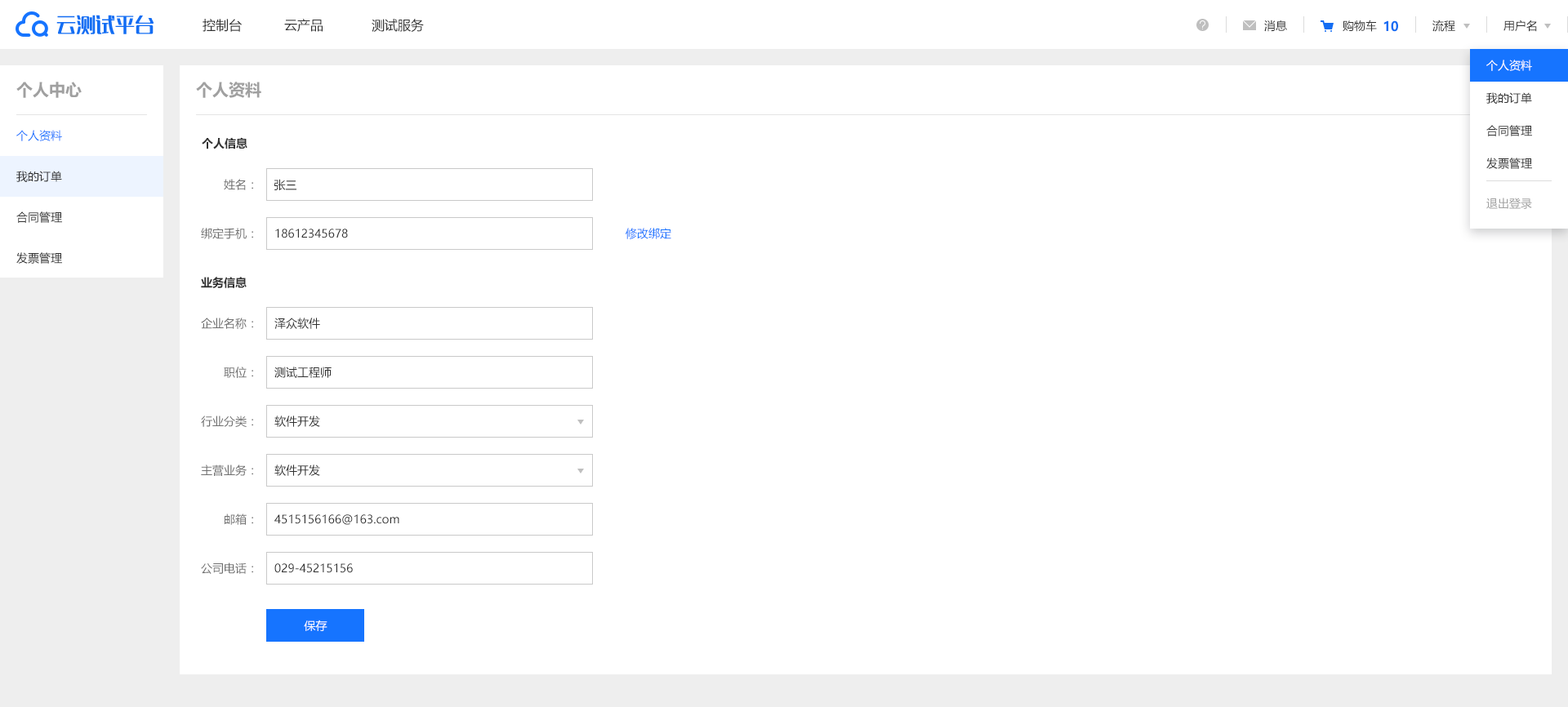
<style>
.page{position:relative;width:1568px;height:707px;background:#ffffff}
.page>*{position:absolute;margin:0}
.t1{font:19.6px "MFLangQian_Noncommercial-Regular";color:#136df3}
.t2{font:13.1px "MicrosoftYaHei";color:#313131}
.t3{font:11.4px "MicrosoftYaHei";color:#313131}
.t4{font:13.1px "MicrosoftYaHei-Bold";color:#136df3}
.t5{font:11.4px "MicrosoftYaHei";color:#ffffff}
.t6{font:16.3px "MicrosoftYaHei-Bold";color:#a0a0a0}
.t7{font:11.4px "MicrosoftYaHei";color:#1674ff}
.t8{font:11.4px "MicrosoftYaHei-Bold";color:#313131}
.t9{font:11.4px "MicrosoftYaHei";color:#707070}
.t10{font:11.4px "MicrosoftYaHei";color:#a0a0a0}
</style>
<div class="page">
<p class="t1" style="left:56px;top:15px;width:98px;height:19px">云测试平台</p>
<p class="t2" style="left:203px;top:19px;width:39px;height:13px">控制台</p>
<p class="t2" style="left:284px;top:19px;width:39px;height:13px">云产品</p>
<p class="t2" style="left:372px;top:19px;width:52px;height:13px">测试服务</p>
<p class="t3" style="left:1264px;top:20px;width:23px;height:12px">消息</p>
<p class="t3" style="left:1343px;top:20px;width:34px;height:12px">购物车</p>
<p class="t4" style="left:1383px;top:20px;width:15px;height:12px">10</p>
<p class="t3" style="left:1432px;top:20px;width:23px;height:12px">流程</p>
<p class="t3" style="left:1503px;top:20px;width:34px;height:12px">用户名</p>
<p class="t5" style="left:1486px;top:60px;width:46px;height:11px">个人资料</p>
<p class="t6" style="left:16px;top:82px;width:66px;height:16px">个人中心</p>
<p class="t6" style="left:196px;top:82px;width:65px;height:16px">个人资料</p>
<p class="t3" style="left:1486px;top:92px;width:46px;height:12px">我的订单</p>
<p class="t3" style="left:1486px;top:125px;width:46px;height:11px">合同管理</p>
<p class="t7" style="left:16px;top:130px;width:46px;height:11px">个人资料</p>
<p class="t8" style="left:202px;top:137px;width:45px;height:12px">个人信息</p>
<p class="t3" style="left:1486px;top:158px;width:46px;height:11px">发票管理</p>
<p class="t3" style="left:16px;top:171px;width:46px;height:11px">我的订单</p>
<p class="t9" style="left:224px;top:179px;width:29px;height:11px">姓名：</p>
<p class="t3" style="left:274px;top:179px;width:22px;height:11px">张三</p>
<p class="t10" style="left:1486px;top:198px;width:46px;height:11px">退出登录</p>
<p class="t3" style="left:16px;top:212px;width:46px;height:11px">合同管理</p>
<p class="t9" style="left:201px;top:228px;width:52px;height:11px">绑定手机：</p>
<p class="t3" style="left:275px;top:229px;width:73px;height:9px">18612345678</p>
<p class="t7" style="left:626px;top:228px;width:45px;height:11px">修改绑定</p>
<p class="t3" style="left:16px;top:252px;width:46px;height:12px">发票管理</p>
<p class="t8" style="left:201px;top:277px;width:46px;height:11px">业务信息</p>
<p class="t9" style="left:201px;top:318px;width:52px;height:11px">企业名称：</p>
<p class="t3" style="left:274px;top:318px;width:46px;height:11px">泽众软件</p>
<p class="t9" style="left:224px;top:367px;width:29px;height:11px">职位：</p>
<p class="t3" style="left:274px;top:367px;width:58px;height:11px">测试工程师</p>
<p class="t9" style="left:201px;top:416px;width:52px;height:11px">行业分类：</p>
<p class="t3" style="left:274px;top:416px;width:46px;height:11px">软件开发</p>
<p class="t9" style="left:201px;top:465px;width:52px;height:11px">主营业务：</p>
<p class="t3" style="left:274px;top:465px;width:46px;height:11px">软件开发</p>
<p class="t9" style="left:225px;top:514px;width:28px;height:11px">邮箱：</p>
<p class="t3" style="left:274px;top:514px;width:125px;height:11px">4515156166@163.com</p>
<p class="t9" style="left:201px;top:563px;width:52px;height:11px">公司电话：</p>
<p class="t3" style="left:274px;top:564px;width:79px;height:9px">029-45215156</p>
<p class="t5" style="left:304px;top:620px;width:23px;height:11px">保存</p>
</div>
